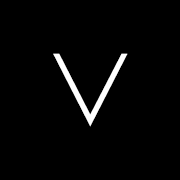
<style>
.page{position:relative;width:180px;height:180px;background:#000000}
.page>*{position:absolute;margin:0}
.t1{font:100px "Vonique92";letter-spacing:0.15em;color:#ffffff}
</style>
<div class="page">
<p class="t1" style="left:53px;top:53px;width:75px;height:74px">v</p>
</div>
